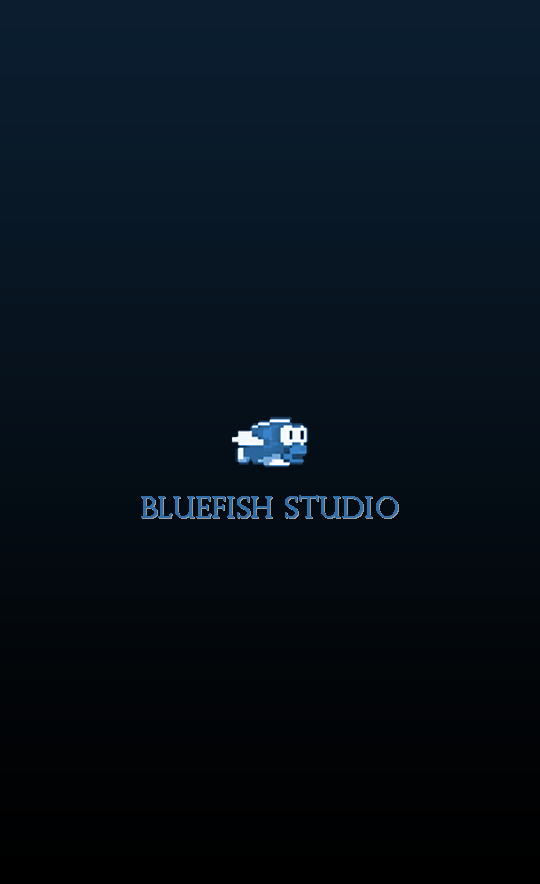
<style>
.page{position:relative;width:540px;height:884px}
.page>*{position:absolute;margin:0}
.t1{font:28.8px "PerpetuaTitlingMT-Light";color:#2f6ea9;font-weight:bold}
</style>
<div class="page">
<p class="t1" style="left:141px;top:495px;width:257px;height:23px">BLUEFISH STUDIO</p>
</div>
